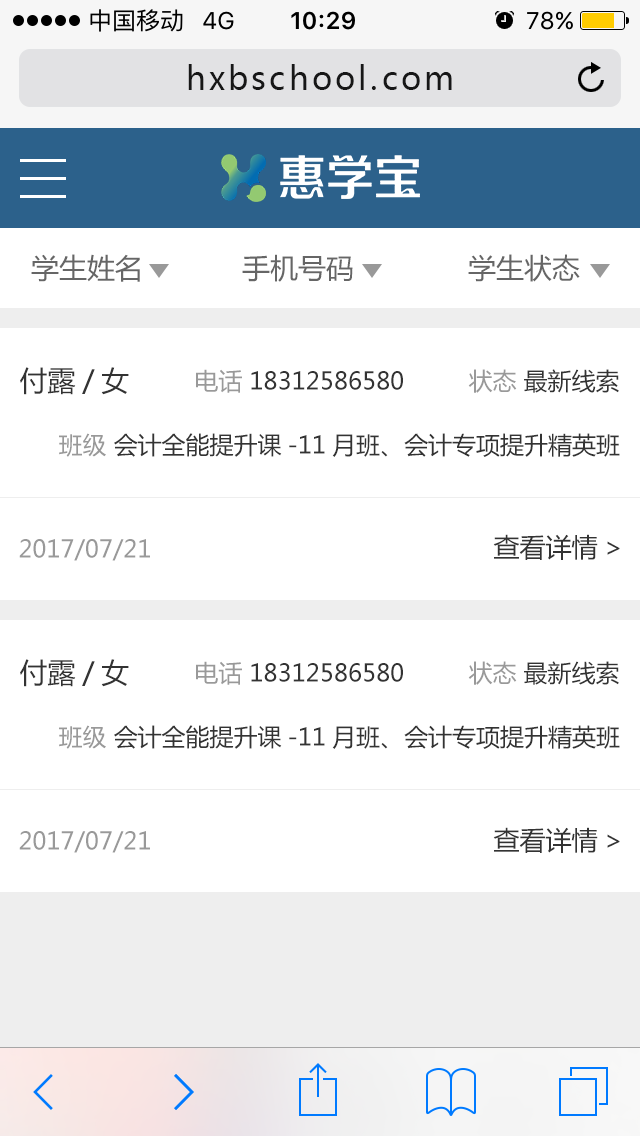
<style>
.page{position:relative;width:640px;height:1136px;background:#ffffff}
.page>*{position:absolute;margin:0}
.t1{font:32px "MicrosoftYaHei";letter-spacing:0.1em;color:#171717}
.t2{font:28px "MicrosoftYaHei";color:#666666}
.t3{font:28px "MicrosoftYaHei";color:#333333}
.t4{font:24px "MicrosoftYaHei";color:#333333}
.t5{font:24px "MicrosoftYaHei";color:#999999}
.t6{font:26px "MicrosoftYaHei";color:#333333}
</style>
<div class="page">
<p class="t1" style="left:188px;top:64px;width:264px;height:26px">hxbschool.com</p>
<p class="t2" style="left:31px;top:254px;width:109px;height:28px">学生姓名</p>
<p class="t2" style="left:242px;top:254px;width:111px;height:28px">手机号码</p>
<p class="t2" style="left:468px;top:254px;width:112px;height:28px">学生状态</p>
<p class="t3" style="left:20px;top:367px;width:109px;height:28px">付露/女</p>
<p class="t4" style="left:196px;top:369px;width:207px;height:24px"><span class="t5">电话 </span>18312586580</p>
<p class="t4" style="left:468px;top:369px;width:151px;height:24px"><span class="t5">状态 </span>最新线索</p>
<p class="t4" style="left:59px;top:433px;width:561px;height:24px"><span class="t5">班级 </span>会计全能提升课-11月班、会计专项提升精英班</p>
<p class="t6" style="left:493px;top:534px;width:127px;height:26px">查看详情&gt;</p>
<p class="t5" style="left:19px;top:539px;width:131px;height:22px">2017/07/21</p>
<p class="t3" style="left:20px;top:659px;width:109px;height:28px">付露/女</p>
<p class="t4" style="left:196px;top:661px;width:207px;height:24px"><span class="t5">电话 </span>18312586580</p>
<p class="t4" style="left:468px;top:661px;width:151px;height:24px"><span class="t5">状态 </span>最新线索</p>
<p class="t4" style="left:59px;top:725px;width:561px;height:24px"><span class="t5">班级 </span>会计全能提升课-11月班、会计专项提升精英班</p>
<p class="t5" style="left:19px;top:831px;width:131px;height:22px">2017/07/21</p>
<p class="t6" style="left:493px;top:827px;width:127px;height:26px">查看详情&gt;</p>
</div>
